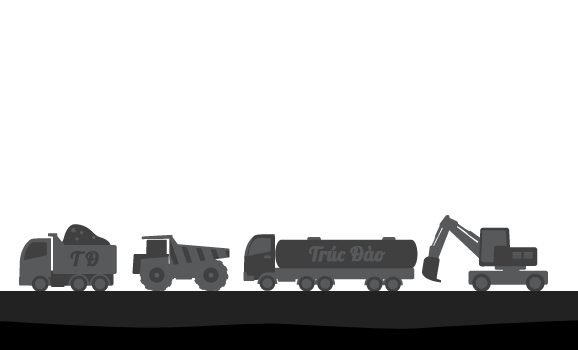
<style>
.page{position:relative;width:578px;height:350px;background:#ffffff}
.page>*{position:absolute;margin:0}
.t1{font:20px "UVFLobster12";color:#58595b;font-weight:bold}
.t2{font:20px "UVFLobster12";color:#404041;font-weight:bold}
</style>
<div class="page">
<p class="t1" style="left:308px;top:246px;width:78px;height:16px">Trúc Đào</p>
<p class="t2" style="left:70px;top:251px;width:29px;height:16px">T Đ</p>
</div>
